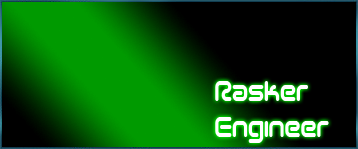
<style>
.page{position:relative;width:358px;height:149px;background:#000000}
.page>*{position:absolute;margin:0}
.t1{font:30px "SciFied2002";color:#ffffff;scale:0.8 1}
</style>
<div class="page">
<p class="t1" style="left:215px;top:81px;width:114px;height:62px">Rasker<br>Engineer</p>
</div>
